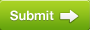
<style>
.page{position:relative;width:90px;height:30px}
.page>*{position:absolute;margin:0}
.t1{font:13px "HelveticaNeue-Bold";color:#ffffff}
</style>
<div class="page">
<p class="t1" style="left:10px;top:10px;width:44px;height:11px">Submit</p>
</div>
